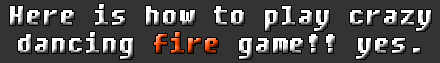
<style>
.page{position:relative;width:440px;height:63px;background:#333333}
.page>*{position:absolute;margin:0}
.t1{font:30px/28px "Fixedsys";font-weight:bold}
</style>
<div class="page">
<p class="t1" style="left:10px;top:4px;width:421px;height:55px;text-align:center">Here is how to play crazy<br>dancing fire game!! yes.</p>
</div>
